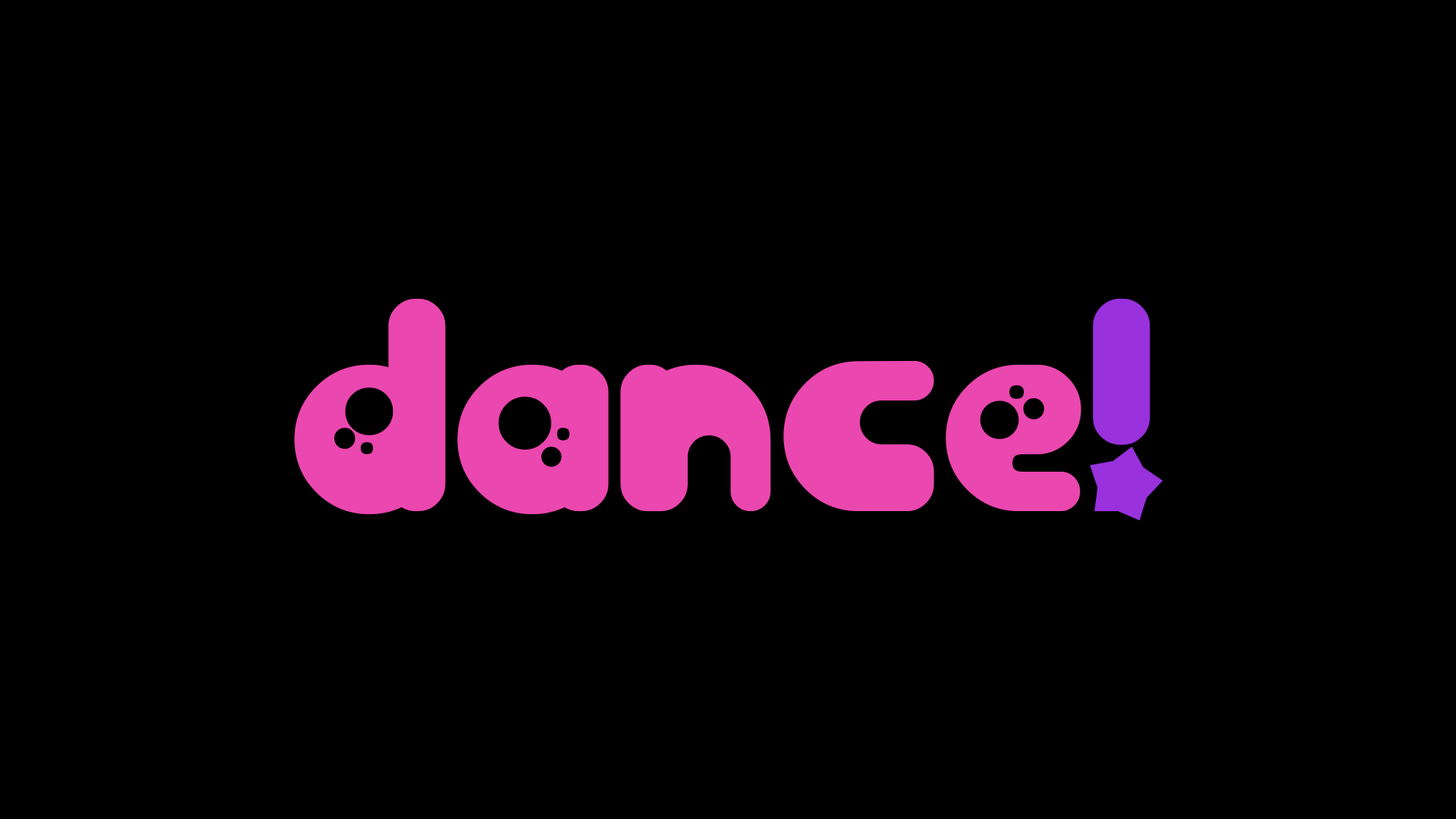
<style>
.page{position:relative;width:1456px;height:819px;background:#000000}
.page>*{position:absolute;margin:0}
.t1{font:303.3px "Billo";color:#ea47af}
.t2{font:303.3px "Billo";color:#9931dd}
</style>
<div class="page">
<p class="t1" style="left:294px;top:299px;width:869px;height:221px">dance<span class="t2">!</span></p>
</div>
